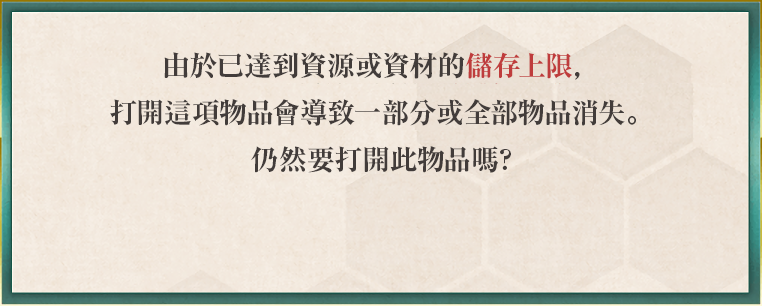
<style>
.page{position:relative;width:762px;height:306px}
.page>*{position:absolute;margin:0}
.t1{font:28px/47px "RyuminPr6N-ExBold";color:#423c3a}
.t2{font:28px/47px "RyuminPr6N-ExBold";color:#bf3c3c}
</style>
<div class="page">
<p class="t1" style="left:110px;top:52px;width:526px;height:121px;text-align:center">由於已達到資源或資材的<span class="t2">儲存上限</span>，<br>打開這項物品會導致一部分或全部物品消失。<br>仍然要打開此物品嗎?</p>
</div>
